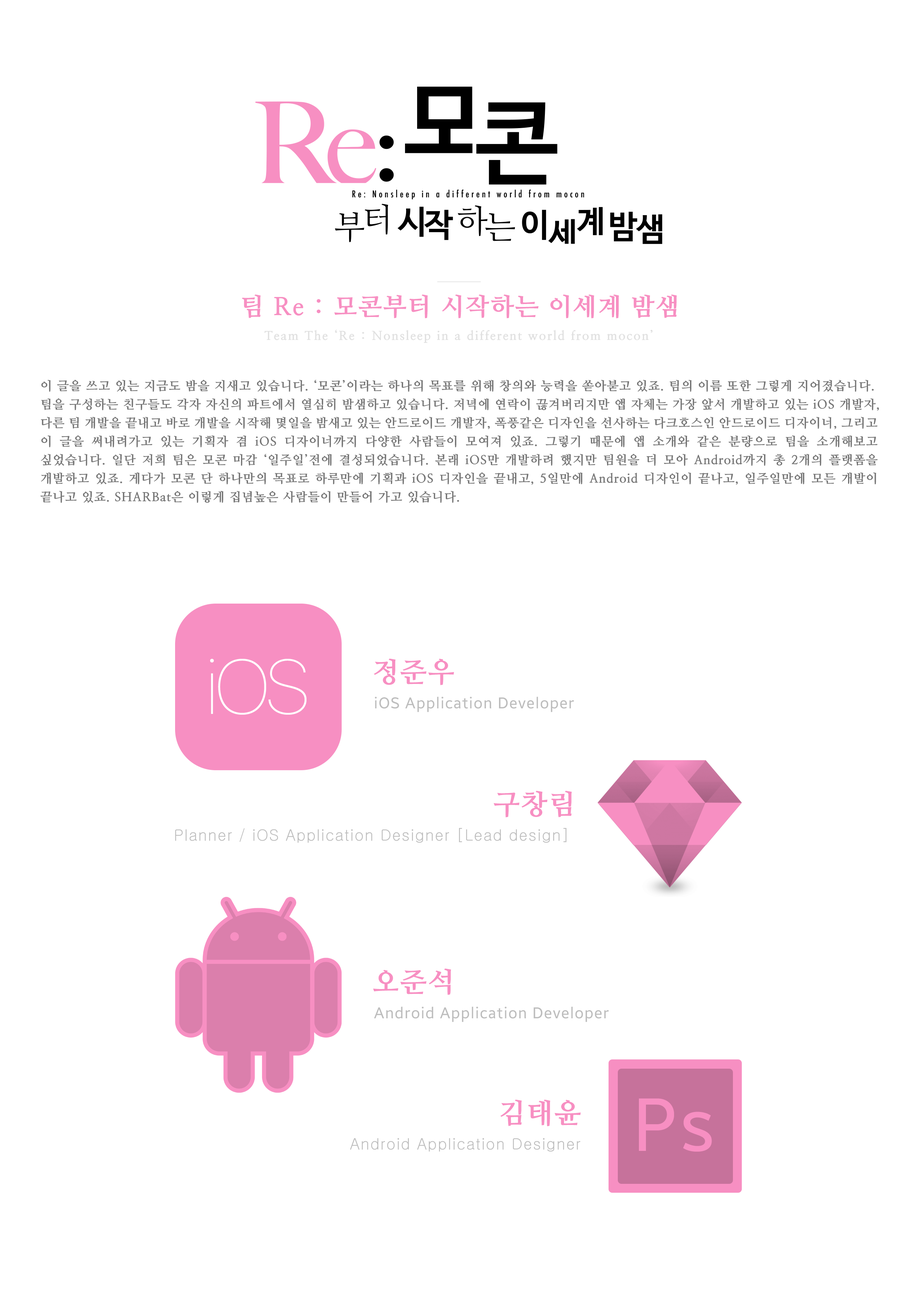
<style>
.page{position:relative;width:918px;height:1299px;background:#ffffff}
.page>*{position:absolute;margin:0}
.t1{font:24.7px "NanumMyeongjoExtraBold";letter-spacing:0.05em;color:#f78fc2}
.t2{font:12.3px "NanumMyeongjoExtraBold";letter-spacing:0.1em;color:#e0e0e0}
.t3{font:12.3px/18.5px "NanumMyeongjoExtraBold";letter-spacing:0.05em;color:#757575}
.t4{font:77.1px "SFUIDisplay-Ultralight";letter-spacing:-0.025em;color:#ffffff}
.t5{font:27.8px "NanumMyeongjoExtraBold";letter-spacing:0.05em;color:#f78fc2}
.t6{font:15.4px "BreezeSans";letter-spacing:0.05em;color:#bdbdbd}
.t7{font:15.4px "Gulim";letter-spacing:0.05em;color:#bdbdbd}
.t8{font:74px "BreezeSans";letter-spacing:0.05em;color:#f78fc2}
</style>
<div class="page">
<p class="t1" style="left:242px;top:294px;width:435px;height:24px">팀 Re : 모콘부터 시작하는 이세계 밤샘</p>
<p class="t2" style="left:264px;top:329px;width:389px;height:14px">Team The ‘Re : Nonsleep in a different world from mocon’</p>
<p class="t3" style="left:40px;top:379px;width:839px;height:124px;text-align:justify">이 글을 쓰고 있는 지금도 밤을 지새고 있습니다. ‘모콘’이라는 하나의 목표를 위해 창의와 능력을 쏟아붇고 있죠. 팀의 이름 또한 그렇게 지어졌습니다.<br>팀을 구성하는 친구들도 각자 자신의 파트에서 열심히 밤샘하고 있습니다. 저녁에 연락이 끊겨버리지만 앱 자체는 가장 앞서 개발하고 있는 iOS 개발자,<br>다른 팀 개발을 끝내고 바로 개발을 시작해 몇일을 밤새고 있는 안드로이드 개발자, 폭풍같은 디자인을 선사하는 다크호스인 안드로이드 디자이너, 그리고 이 글을 써내려가고 있는 기획자 겸 iOS 디자이너까지 다양한 사람들이 모여져 있죠. 그렇기 때문에 앱 소개와 같은 분량으로 팀을 소개해보고 싶었습니다. 일단 저희 팀은 모콘 마감 ‘일주일’전에 결성되었습니다. 본래 iOS만 개발하려 했지만 팀원을 더 모아 Android까지 총 2개의 플랫폼을 개발하고 있죠. 게다가 모콘 단 하나만의 목표로 하루만에 기획과 iOS 디자인을 끝내고, 5일만에 Android 디자인이 끝나고, 일주일만에 모든 개발이 끝나고 있죠. SHARBat은 이렇게 집념높은 사람들이 만들어 가고 있습니다.</p>
<p class="t4" style="left:210px;top:659px;width:97px;height:56px">iOS</p>
<p class="t5" style="left:374px;top:658px;width:80px;height:27px">정준우</p>
<p class="t6" style="left:375px;top:696px;width:199px;height:16px">iOS Application Developer</p>
<p class="t5" style="left:494px;top:790px;width:78px;height:27px">구창림</p>
<p class="t7" style="left:175px;top:828px;width:392px;height:15px">Planner / iOS Application Designer [Lead design]</p>
<p class="t5" style="left:373px;top:968px;width:78px;height:27px">오준석</p>
<p class="t6" style="left:374px;top:1006px;width:235px;height:16px">Android Application Developer</p>
<p class="t5" style="left:501px;top:1099px;width:80px;height:27px">김태윤</p>
<p class="t8" style="left:639px;top:1098px;width:73px;height:53px">Ps</p>
<p class="t7" style="left:350px;top:1138px;width:231px;height:13px">Android Application Designer</p>
</div>
